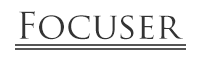
<style>
.page{position:relative;width:201px;height:62px;background:#ffffff}
.page>*{position:absolute;margin:0}
.t1{font:36px "TrajanPro-Regular";color:#333333}
</style>
<div class="page">
<p class="t1" style="left:19px;top:11px;width:164px;height:29px">Focuser</p>
</div>
